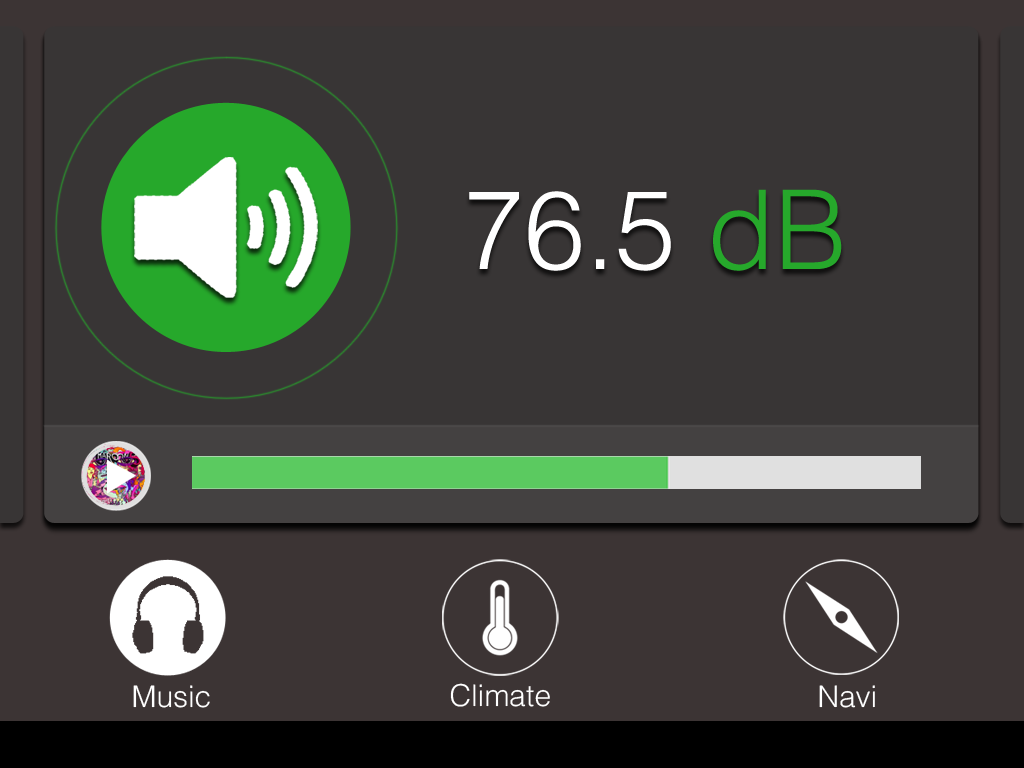
<style>
.page{position:relative;width:1024px;height:768px;background:#383535}
.page>*{position:absolute;margin:0}
.t1{font:110px "Helvetica-Light";color:#ffffff}
.t2{font:110px "Helvetica-Light";color:#26a82b}
.t3{font:30px "Helvetica-Light";color:#ffffff}
</style>
<div class="page">
<p class="t1" style="left:469px;top:189px;width:373px;height:82px">76.5 <span class="t2">dB</span></p>
<p class="t3" style="left:133px;top:685px;width:77px;height:23px">Music</p>
<p class="t3" style="left:450px;top:683px;width:100px;height:24px">Climate</p>
<p class="t3" style="left:819px;top:685px;width:56px;height:23px">Navi</p>
</div>
